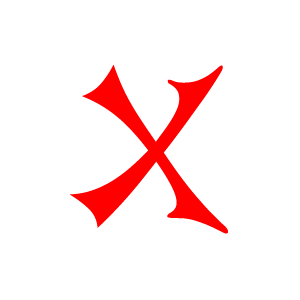
<style>
.page{position:relative;width:300px;height:300px;background:#ffffff}
.page>*{position:absolute;margin:0}
.t1{font:219.5px "Matilda";letter-spacing:0.025em;color:#ff0000;text-transform:uppercase}
</style>
<div class="page">
<p class="t1" style="left:70px;top:64px;width:158px;height:170px">X</p>
</div>
